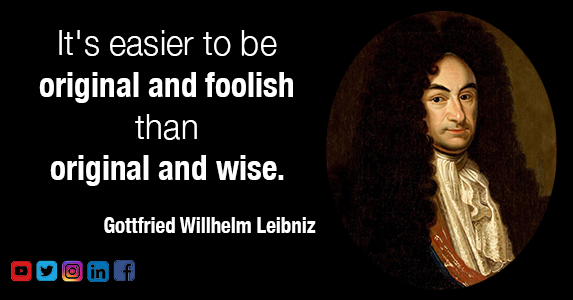
<style>
.page{position:relative;width:573px;height:300px;background:#000000}
.page>*{position:absolute;margin:0}
.t1{font:35px/41.7px "HelveticaNeue-CondensedBold";color:#ffffff;scale:0.95 1}
.t2{font:35px/41.7px "HelveticaNeue-Light";color:#ffffff;scale:0.95 1}
.t3{font:21.9px "HelveticaNeue-CondensedBold";color:#ffffff;scale:0.95 1}
</style>
<div class="page">
<p class="t1" style="left:39px;top:30px;width:254px;height:156px;text-align:center"><span class="t2">It's easier to be </span>original and foolish <span class="t2">than</span> <br>original and wise.</p>
<p class="t3" style="left:104px;top:217px;width:212px;height:16px">Gottfried Willhelm Leibniz</p>
</div>
